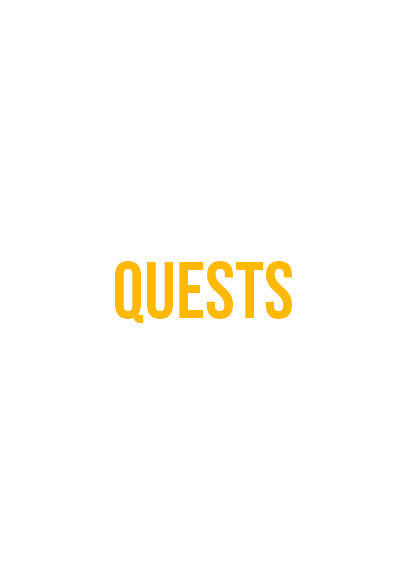
<style>
.page{position:relative;width:408px;height:585px;background:#ffffff}
.page>*{position:absolute;margin:0}
.t1{font:80px "BebasNeue-Regular";color:#ffba00}
</style>
<div class="page">
<p class="t1" style="left:115px;top:261px;width:177px;height:62px">quests</p>
</div>
